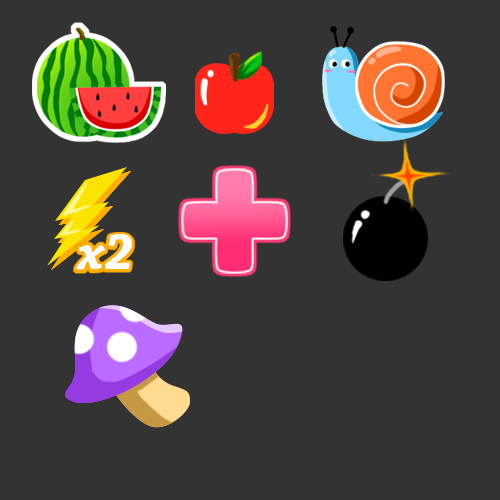
<style>
.page{position:relative;width:500px;height:500px;background:#333333}
.page>*{position:absolute;margin:0}
.t1{font:53.5px "ChaparralPro-BoldIt";color:#ffffff}
</style>
<div class="page">
<p class="t1" style="left:76px;top:234px;width:56px;height:36px">x2</p>
</div>
